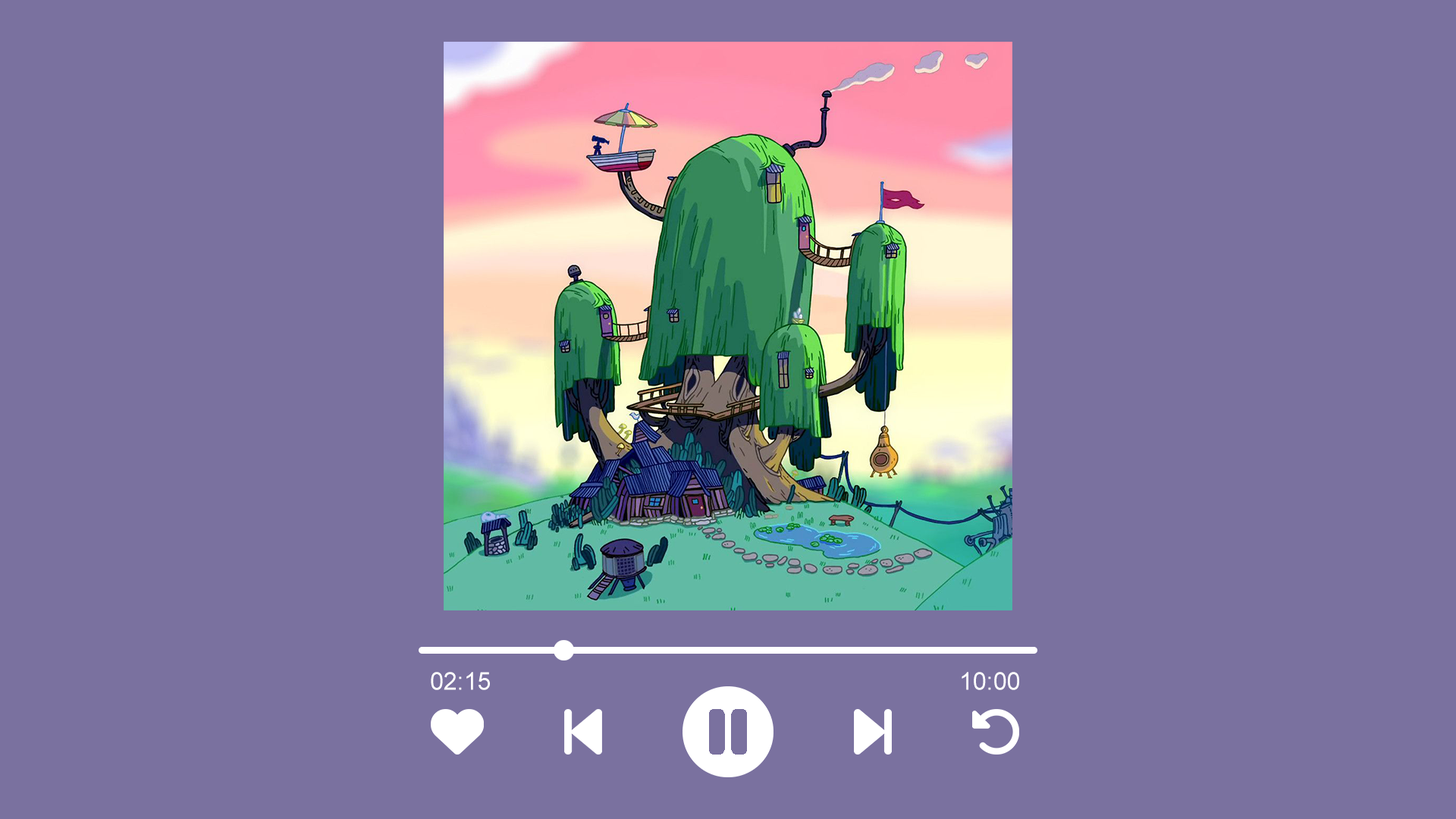
<style>
.page{position:relative;width:1456px;height:819px;background:#7a719f}
.page>*{position:absolute;margin:0}
.t1{font:24.4px "ArialMT";color:#ffffff}
</style>
<div class="page">
<p class="t1" style="left:431px;top:672px;width:59px;height:18px">02:15</p>
<p class="t1" style="left:962px;top:672px;width:57px;height:18px">10:00</p>
</div>
